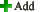
<style>
.page{position:relative;width:40px;height:12px;background:#ffffff}
.page>*{position:absolute;margin:0}
.t1{font:12px "TimesNewRomanPSMT";letter-spacing:-0.005em;color:#31372c}
</style>
<div class="page">
<p class="t1" style="left:14px;top:1px;width:21px;height:10px">Add</p>
<p class="t1" style="left:14px;top:1px;width:21px;height:10px">Add</p>
</div>
